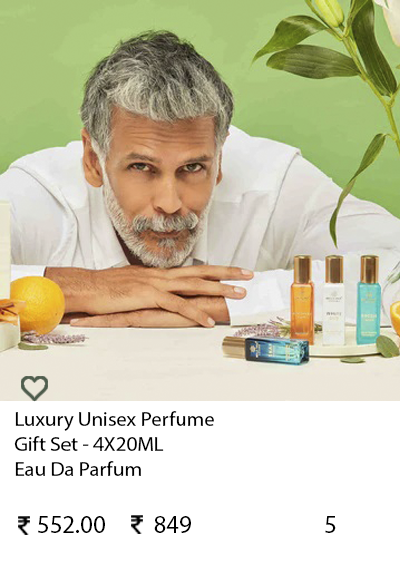
<style>
.page{position:relative;width:400px;height:569px;background:#ffffff}
.page>*{position:absolute;margin:0}
.t1{font:20.8px "MyriadPro-Regular";color:#000000}
.t2{font:25px "MyriadPro-Regular";color:#000000}
</style>
<div class="page">
<p class="t1" style="left:14px;top:411px;width:200px;height:65px">Luxury Unisex Perfume<br>Gift Set - 4X20ML<br>Eau Da Parfum</p>
<p class="t2" style="left:38px;top:516px;width:153px;height:17px">552.00         849</p>
<p class="t2" style="left:325px;top:516px;width:11px;height:17px">5</p>
</div>
